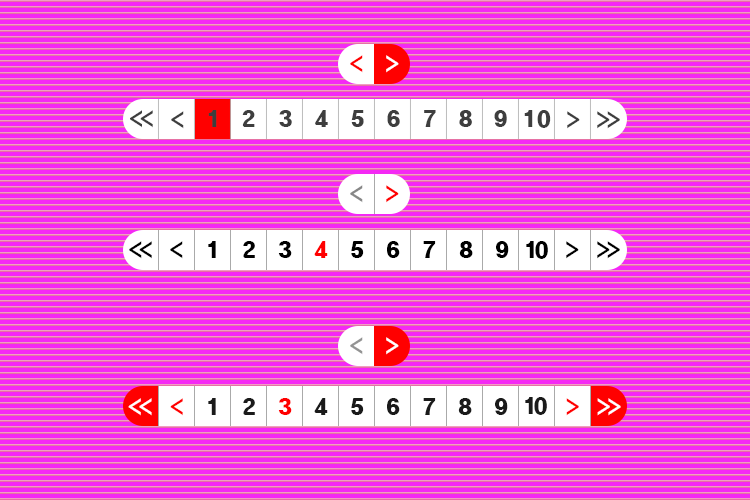
<style>
.page{position:relative;width:750px;height:500px;background:#f429f4}
.page>*{position:absolute;margin:0}
.t1{font:20px "HeadlineR-HM";letter-spacing:-0.2em;color:#ff0000}
.t2{font:20px "HeadlineR-HM";letter-spacing:-0.2em;color:#ffffff}
.t3{font:20px "HeadlineR-HM";letter-spacing:-0.2em;color:#3e3e3e}
.t4{font:20px "HeadlineR-HM";letter-spacing:0.32em;color:#3e3e3e}
.t5{font:20px "HeadlineR-HM";color:#3e3e3e}
.t6{font:20px "HeadlineR-HM";letter-spacing:-0.2em;color:#878787}
.t7{font:20px "HeadlineR-HM";letter-spacing:-0.2em;color:#000000}
.t8{font:20px "HeadlineR-HM";letter-spacing:-0.2em;color:#939393}
.t9{font:20px "HeadlineR-HM";letter-spacing:-0.2em;color:#1a1a1a}
</style>
<div class="page">
<p class="t1" style="left:350px;top:55px;width:13px;height:18px">&lt;</p>
<p class="t2" style="left:386px;top:55px;width:13px;height:18px">&gt;</p>
<p class="t3" style="left:130px;top:110px;width:23px;height:18px">&lt;&lt;</p>
<p class="t3" style="left:171px;top:111px;width:13px;height:18px">&lt;</p>
<p class="t4" style="left:208px;top:110px;width:9px;height:17px">1</p>
<p class="t4" style="left:242px;top:110px;width:13px;height:17px">2</p>
<p class="t4" style="left:279px;top:110px;width:13px;height:17px">3</p>
<p class="t4" style="left:315px;top:110px;width:13px;height:17px">4</p>
<p class="t4" style="left:351px;top:110px;width:13px;height:17px">5</p>
<p class="t4" style="left:387px;top:110px;width:13px;height:17px">6</p>
<p class="t4" style="left:424px;top:110px;width:12px;height:17px">7</p>
<p class="t4" style="left:459px;top:110px;width:13px;height:17px">8</p>
<p class="t4" style="left:494px;top:110px;width:13px;height:17px">9</p>
<p class="t5" style="left:524px;top:110px;width:27px;height:18px">10</p>
<p class="t3" style="left:567px;top:111px;width:13px;height:18px">&gt;</p>
<p class="t3" style="left:597px;top:111px;width:23px;height:18px">&gt;&gt;</p>
<p class="t6" style="left:350px;top:185px;width:13px;height:18px">&lt;</p>
<p class="t1" style="left:386px;top:185px;width:13px;height:18px">&gt;</p>
<p class="t7" style="left:129px;top:241px;width:23px;height:18px">&lt;&lt;</p>
<p class="t7" style="left:170px;top:241px;width:13px;height:18px">&lt;</p>
<p class="t7" style="left:208px;top:241px;width:8px;height:17px">1</p>
<p class="t7" style="left:243px;top:241px;width:12px;height:17px">2</p>
<p class="t7" style="left:278px;top:241px;width:14px;height:17px">3</p>
<p class="t1" style="left:314px;top:241px;width:14px;height:17px">4</p>
<p class="t7" style="left:351px;top:241px;width:13px;height:17px">5</p>
<p class="t7" style="left:387px;top:241px;width:13px;height:17px">6</p>
<p class="t7" style="left:423px;top:241px;width:13px;height:17px">7</p>
<p class="t7" style="left:459px;top:241px;width:14px;height:17px">8</p>
<p class="t7" style="left:496px;top:241px;width:13px;height:17px">9</p>
<p class="t7" style="left:526px;top:241px;width:22px;height:18px">10</p>
<p class="t7" style="left:566px;top:241px;width:13px;height:18px">&gt;</p>
<p class="t7" style="left:597px;top:241px;width:23px;height:18px">&gt;&gt;</p>
<p class="t8" style="left:350px;top:337px;width:13px;height:18px">&lt;</p>
<p class="t2" style="left:386px;top:337px;width:13px;height:18px">&gt;</p>
<p class="t2" style="left:128px;top:398px;width:24px;height:18px">&lt;&lt;</p>
<p class="t1" style="left:170px;top:398px;width:13px;height:18px">&lt;</p>
<p class="t9" style="left:208px;top:398px;width:8px;height:17px">1</p>
<p class="t9" style="left:243px;top:398px;width:12px;height:17px">2</p>
<p class="t1" style="left:278px;top:398px;width:14px;height:17px">3</p>
<p class="t9" style="left:314px;top:398px;width:14px;height:17px">4</p>
<p class="t9" style="left:351px;top:398px;width:13px;height:17px">5</p>
<p class="t9" style="left:387px;top:398px;width:13px;height:17px">6</p>
<p class="t9" style="left:423px;top:398px;width:13px;height:17px">7</p>
<p class="t9" style="left:458px;top:398px;width:14px;height:17px">8</p>
<p class="t9" style="left:495px;top:398px;width:13px;height:17px">9</p>
<p class="t9" style="left:525px;top:397px;width:22px;height:18px">10</p>
<p class="t1" style="left:566px;top:398px;width:13px;height:18px">&gt;</p>
<p class="t2" style="left:597px;top:398px;width:24px;height:18px">&gt;&gt;</p>
</div>
